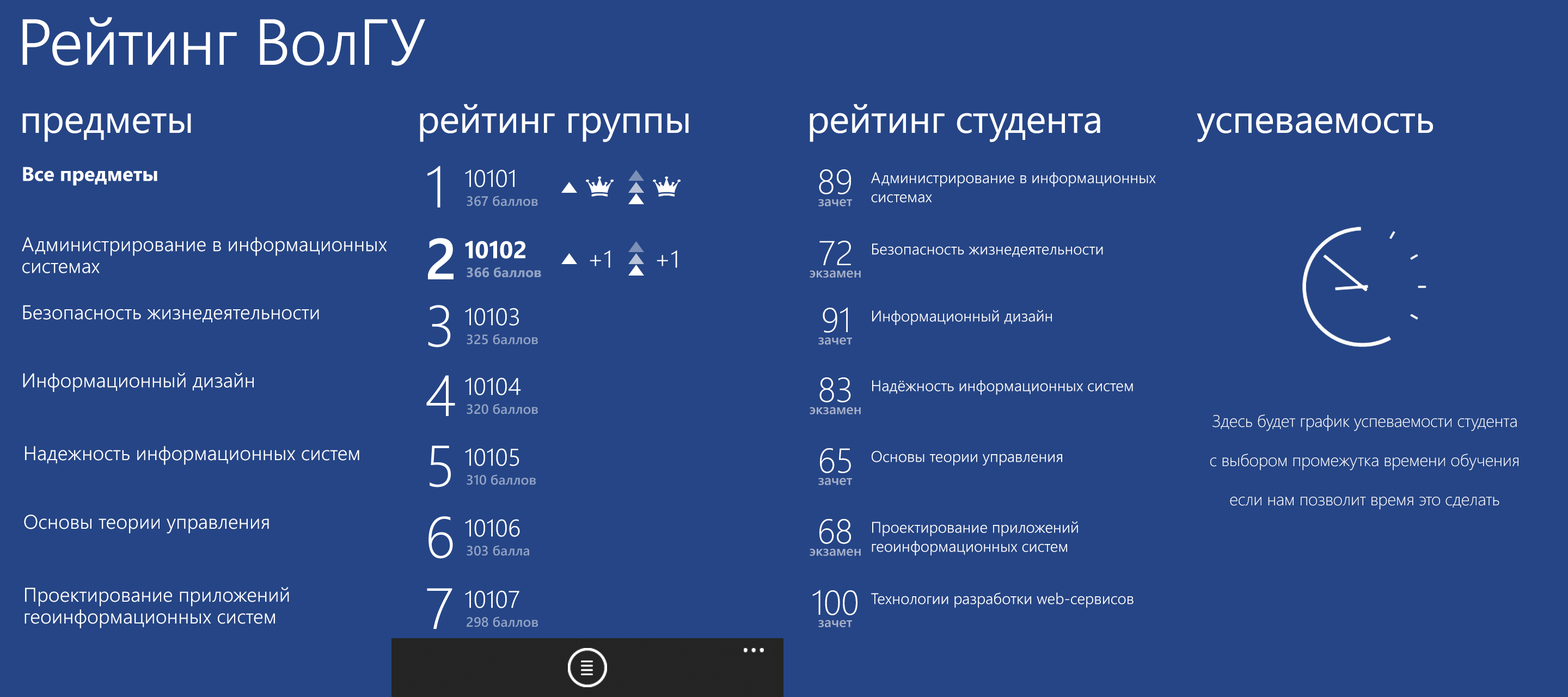
<style>
.page{position:relative;width:1568px;height:697px;background:#254586}
.page>*{position:absolute;margin:0}
.t1{font:64.8px "SegoeWP-SemiLight";letter-spacing:-0.01em;color:#ffffff}
.t2{font:38.7px "SegoeWP";letter-spacing:-0.01em;color:#ffffff}
.t3{font:19.8px "SegoeWP-Bold";color:#ffffff}
.t4{font:57.9px "SegoeWP-Light";color:#ffffff}
.t5{font:24.1px "SegoeWP-SemiLight";color:#ffffff}
.t6{font:34.5px "SegoeWP-Light";color:#ffffff}
.t7{font:15.4px/19.1px "SegoeWP-SemiLight";color:#ffffff}
.t8{font:13.6px "SegoeWP-Semibold";color:#92a2c3}
.t9{font:13.6px "SegoeWP-Semibold";color:#a7b0c8}
.t10{font:19.8px/21.8px "SegoeWP-SemiLight";color:#ffffff}
.t11{font:57.9px "SegoeWP-Semibold";color:#ffffff}
.t12{font:24.1px "SegoeWP-Bold";color:#ffffff}
.t13{font:15.4px "SegoeWP-SemiLight";color:#ffffff}
.t14{font:13.6px "SegoeWP-Bold";color:#92a2c3}
.t15{font:19.8px "SegoeWP-SemiLight";color:#ffffff}
.t16{font:16.9px/39.2px "SegoeWP-Light";letter-spacing:-0.01em;color:#ffffff}
</style>
<div class="page">
<p class="t1" style="left:22px;top:17px;width:403px;height:49px">Рейтинг ВолГУ</p>
<p class="t2" style="left:22px;top:113px;width:169px;height:29px">предметы</p>
<p class="t2" style="left:420px;top:104px;width:269px;height:38px">рейтинг группы</p>
<p class="t2" style="left:810px;top:104px;width:290px;height:38px">рейтинг студента</p>
<p class="t2" style="left:1197px;top:113px;width:236px;height:29px">успеваемость</p>
<p class="t3" style="left:23px;top:167px;width:134px;height:19px">Все предметы</p>
<p class="t4" style="left:427px;top:166px;width:13px;height:41px">1</p>
<p class="t5" style="left:465px;top:169px;width:49px;height:18px">10101</p>
<p class="t6" style="left:819px;top:169px;width:32px;height:25px">89</p>
<p class="t7" style="left:871px;top:172px;width:285px;height:31px">Администрирование в информационных<br>системах</p>
<p class="t8" style="left:467px;top:195px;width:71px;height:11px">367 баллов</p>
<p class="t9" style="left:818px;top:199px;width:34px;height:7px">зачет</p>
<p class="t10" style="left:22px;top:237px;width:365px;height:36px">Администрирование в информационных <br>системах</p>
<p class="t11" style="left:428px;top:238px;width:26px;height:41px">2</p>
<p class="t12" style="left:465px;top:241px;width:60px;height:18px">10102</p>
<p class="t6" style="left:819px;top:241px;width:32px;height:24px">72</p>
<p class="t13" style="left:872px;top:243px;width:231px;height:14px">Безопасность жизнедеятельности</p>
<p class="t5" style="left:590px;top:250px;width:20px;height:18px">+1</p>
<p class="t5" style="left:657px;top:250px;width:20px;height:18px">+1</p>
<p class="t14" style="left:467px;top:267px;width:74px;height:11px">366 баллов</p>
<p class="t9" style="left:810px;top:270px;width:51px;height:8px">экзамен</p>
<p class="t15" style="left:23px;top:305px;width:296px;height:17px">Безопасность жизнедеятельности</p>
<p class="t4" style="left:428px;top:305px;width:23px;height:42px">3</p>
<p class="t5" style="left:465px;top:308px;width:54px;height:18px">10103</p>
<p class="t6" style="left:823px;top:307px;width:25px;height:26px">91</p>
<p class="t13" style="left:872px;top:310px;width:180px;height:15px">Информационный дизайн</p>
<p class="t8" style="left:467px;top:334px;width:71px;height:11px">325 баллов</p>
<p class="t9" style="left:818px;top:337px;width:34px;height:8px">зачет</p>
<p class="t15" style="left:23px;top:372px;width:231px;height:20px">Информационный дизайн</p>
<p class="t4" style="left:426px;top:375px;width:29px;height:41px">4</p>
<p class="t5" style="left:465px;top:377px;width:56px;height:18px">10104</p>
<p class="t6" style="left:819px;top:377px;width:32px;height:25px">83</p>
<p class="t13" style="left:872px;top:380px;width:261px;height:15px">Надёжность информационных систем</p>
<p class="t8" style="left:467px;top:403px;width:71px;height:11px">320 баллов</p>
<p class="t9" style="left:810px;top:407px;width:51px;height:7px">экзамен</p>
<p class="t16" style="left:1210px;top:414px;width:308px;height:96px;text-align:center">Здесь будет график успеваемости студента<br>с выбором промежутка времени обучения<br>если нам позволит время это сделать</p>
<p class="t15" style="left:25px;top:446px;width:334px;height:19px">Надежность информационных систем</p>
<p class="t4" style="left:430px;top:445px;width:21px;height:42px">5</p>
<p class="t5" style="left:465px;top:448px;width:54px;height:18px">10105</p>
<p class="t6" style="left:820px;top:448px;width:31px;height:25px">65</p>
<p class="t13" style="left:872px;top:451px;width:190px;height:14px">Основы теории управления</p>
<p class="t8" style="left:467px;top:474px;width:69px;height:11px">310 баллов</p>
<p class="t9" style="left:818px;top:477px;width:34px;height:8px">зачет</p>
<p class="t15" style="left:24px;top:514px;width:245px;height:20px">Основы теории управления</p>
<p class="t4" style="left:428px;top:516px;width:25px;height:43px">6</p>
<p class="t5" style="left:465px;top:519px;width:55px;height:18px">10106</p>
<p class="t6" style="left:819px;top:519px;width:32px;height:25px">68</p>
<p class="t7" style="left:872px;top:521px;width:206px;height:34px">Проектирование приложений <br>геоинформационных систем</p>
<p class="t8" style="left:467px;top:545px;width:62px;height:11px">303 балла</p>
<p class="t9" style="left:810px;top:548px;width:51px;height:8px">экзамен</p>
<p class="t10" style="left:24px;top:587px;width:265px;height:41px">Проектирование приложений <br>геоинформационных систем</p>
<p class="t4" style="left:427px;top:588px;width:25px;height:41px">7</p>
<p class="t5" style="left:465px;top:590px;width:54px;height:18px">10107</p>
<p class="t6" style="left:812px;top:590px;width:45px;height:25px">100</p>
<p class="t13" style="left:871px;top:592px;width:263px;height:16px">Технологии разработки web-сервисов</p>
<p class="t8" style="left:467px;top:616px;width:71px;height:11px">298 баллов</p>
<p class="t9" style="left:818px;top:620px;width:34px;height:7px">зачет</p>
</div>
